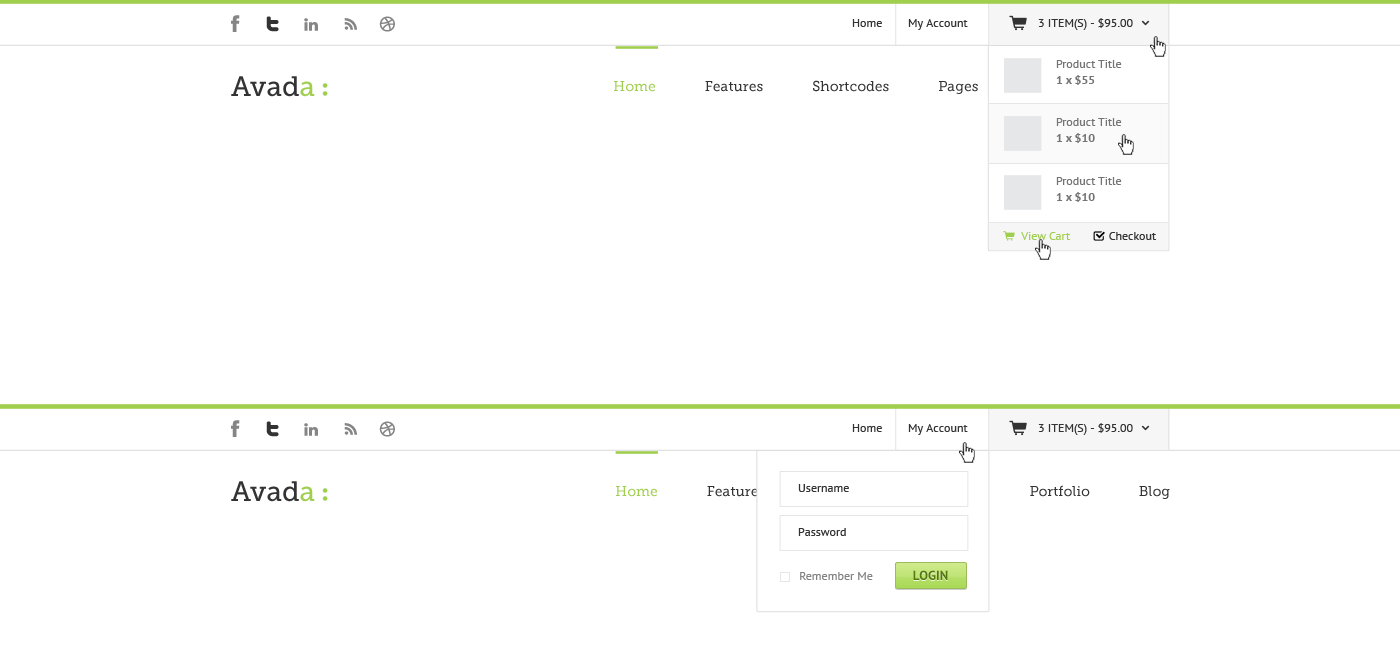
<style>
.page{position:relative;width:1400px;height:672px;background:#ffffff}
.page>*{position:absolute;margin:0}
.t1{font:12px "PTSans-Regular";color:#333333}
.t2{font:12px/16px "PTSans-Regular";color:#747474}
.t3{font:12px/16px "PTSans-Bold";color:#747474}
.t4{font:28px "MuseoSlab-500";color:#333333}
.t5{font:28px "MuseoSlab-500";color:#a0ce4e}
.t6{font:14px "MuseoSlab-500";color:#333333}
.t7{font:14px "MuseoSlab-500";color:#a0ce4e}
.t8{font:12px "PTSans-Regular";color:#a0ce4e}
.t9{font:12px "PTSans-Regular";color:#838383}
.t10{font:13px "PTSans-Bold";color:#54770f;text-transform:uppercase}
</style>
<div class="page">
<p class="t1" style="left:852px;top:18px;width:281px;height:12px">Home        My Account                      3 ITEM(S) - $95.00</p>
<p class="t2" style="left:1056px;top:60px;width:66px;height:25px">Product Title <br><span class="t3">1 x $55</span></p>
<p class="t4" style="left:231px;top:76px;width:84px;height:21px">Avad<span class="t5">a</span></p>
<p class="t6" style="left:614px;top:80px;width:554px;height:14px"><span class="t7">Home              </span>Features              Shortcodes              Pages              Portfolio              Blog</p>
<p class="t2" style="left:1056px;top:118px;width:66px;height:25px">Product Title<br><span class="t3">1 x $10</span></p>
<p class="t2" style="left:1056px;top:177px;width:66px;height:25px">Product Title<br><span class="t3">1 x $10</span></p>
<p class="t8" style="left:1021px;top:232px;width:50px;height:8px">View Cart</p>
<p class="t1" style="left:1109px;top:232px;width:48px;height:8px">Checkout</p>
<p class="t1" style="left:852px;top:423px;width:281px;height:12px">Home        My Account                      3 ITEM(S) - $95.00</p>
<p class="t4" style="left:231px;top:481px;width:84px;height:21px">Avad<span class="t5">a</span></p>
<p class="t6" style="left:616px;top:485px;width:554px;height:14px"><span class="t7">Home              </span>Features              Shortcodes              Pages              Portfolio              Blog</p>
<p class="t1" style="left:798px;top:484px;width:51px;height:8px">Username</p>
<p class="t1" style="left:798px;top:528px;width:48px;height:8px">Password</p>
<p class="t9" style="left:800px;top:572px;width:73px;height:8px">Remember Me</p>
<p class="t10" style="left:913px;top:570px;width:35px;height:10px">Login</p>
</div>
